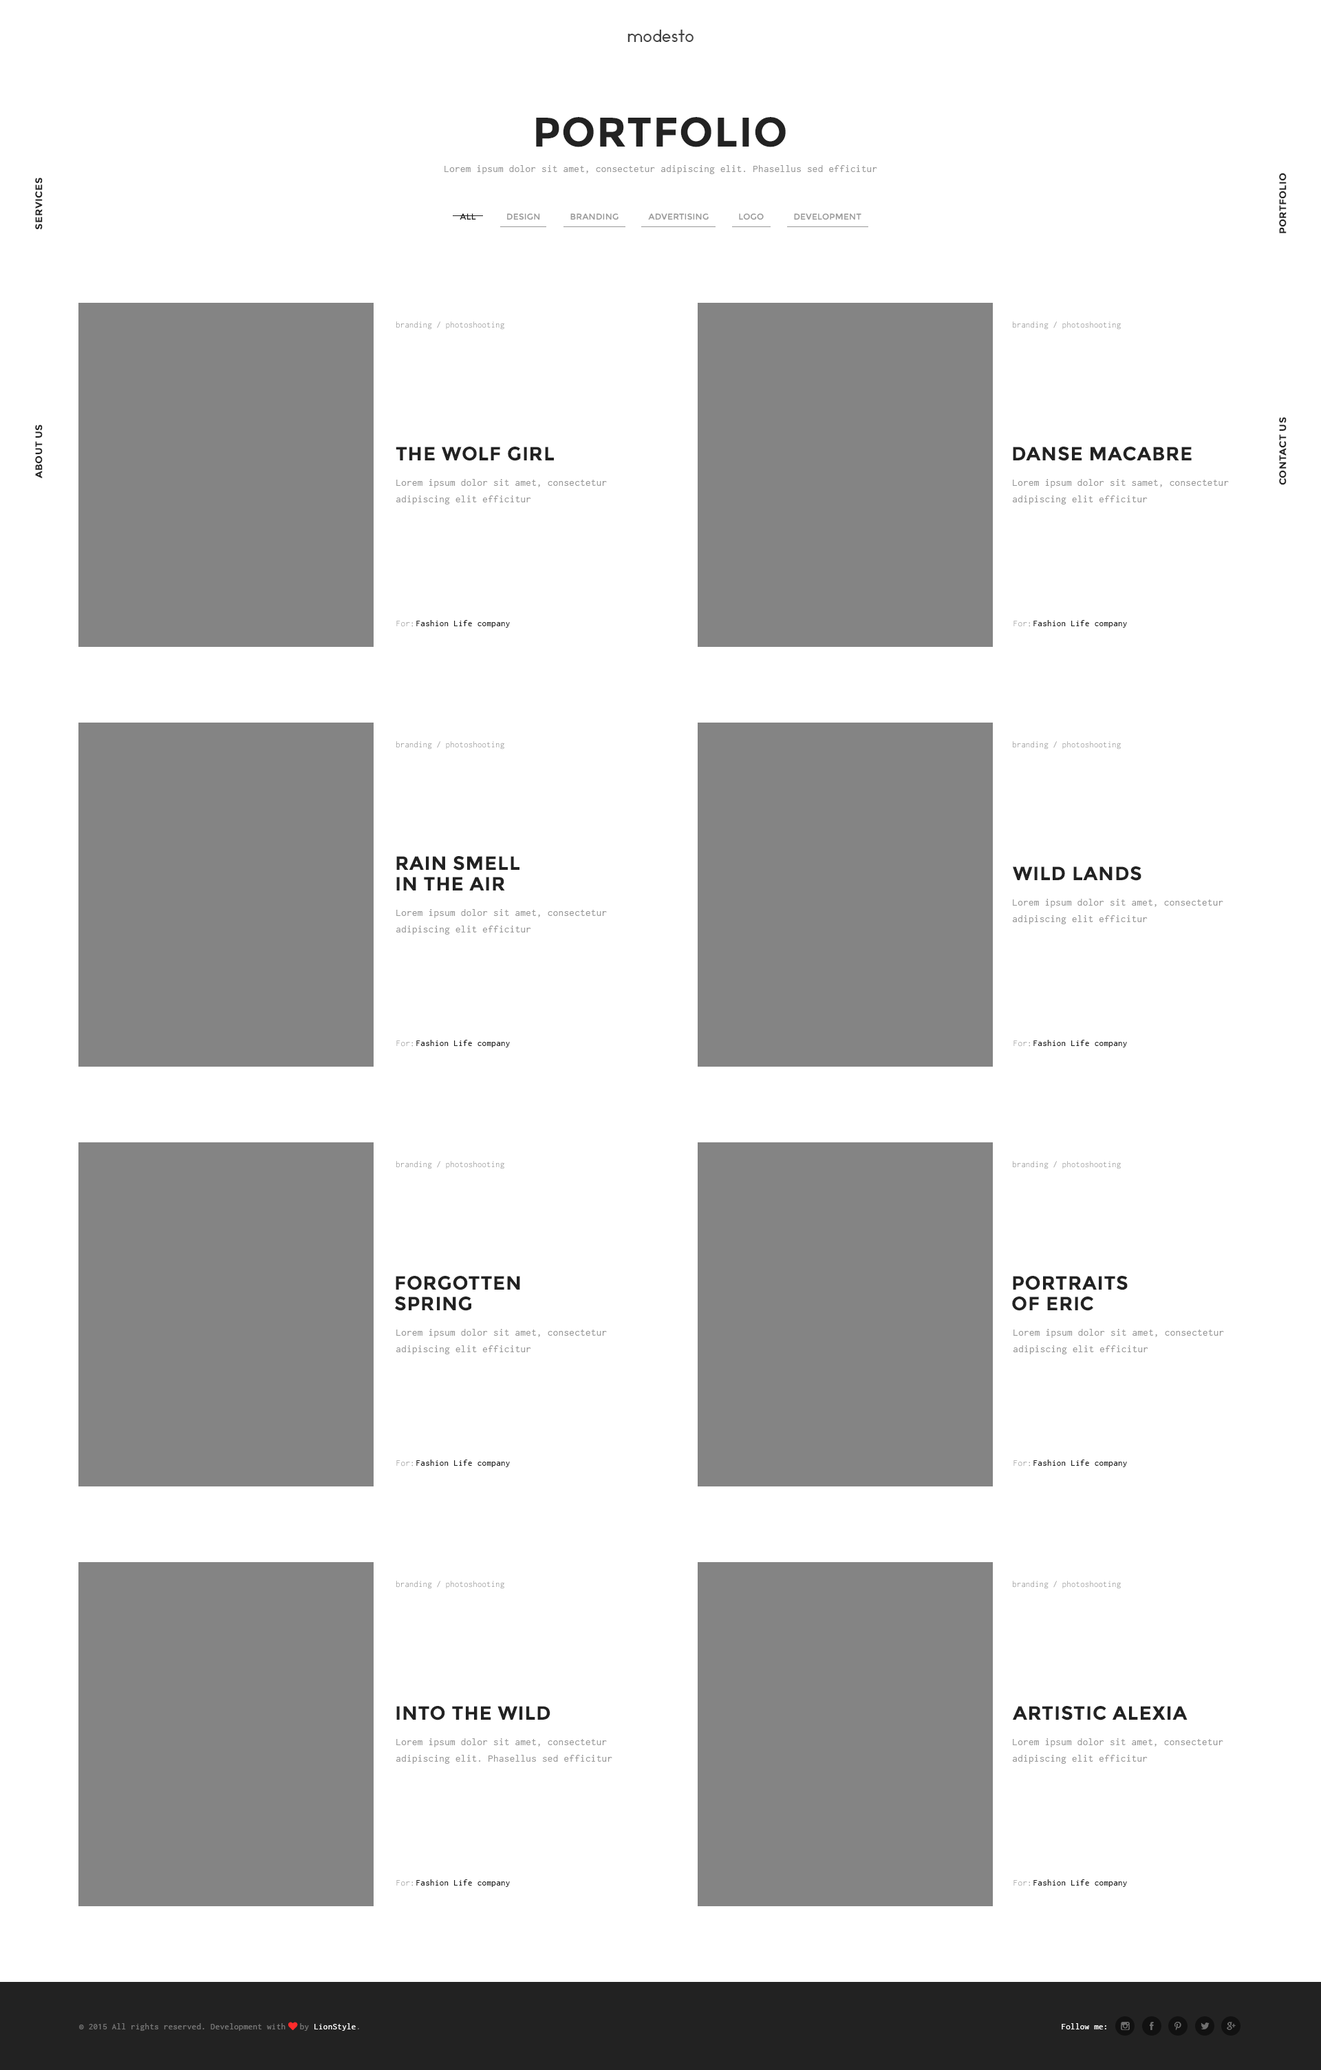
<style>
.page{position:relative;width:1321px;height:2070px;background:#ffffff}
.page>*{position:absolute;margin:0}
.t1{font:16.5px "Ikaros";letter-spacing:0.025em;color:#444444}
.t2{font:41.3px "Montserrat-Bold";letter-spacing:0.025em;color:#222222;text-transform:uppercase}
.t3{font:10.3px "Inconsolata";letter-spacing:0.025em;color:#989898}
.t4{font:9.6px "Montserrat-Bold";letter-spacing:0.025em;color:#222222;text-transform:uppercase;scale:1.03 1}
.t5{font:8.3px "Montserrat-Regular";letter-spacing:0.025em;color:#222222;text-transform:uppercase}
.t6{font:8.3px "Montserrat-Regular";letter-spacing:0.025em;color:#989898;text-transform:uppercase}
.t7{font:8.9px "Inconsolata";letter-spacing:0.025em;color:#989898;scale:0.97 1}
.t8{font:19.3px "Montserrat-Bold";letter-spacing:0.025em;color:#222222;text-transform:uppercase}
.t9{font:10.3px/16.5px "Inconsolata";letter-spacing:0.025em;color:#989898}
.t10{font:8.9px "Inconsolata";letter-spacing:0.025em;color:#989898}
.t11{font:9px "Inconsolata";letter-spacing:0.025em;color:#222222}
.t12{font:19.3px/20.6px "Montserrat-Bold";letter-spacing:0.025em;color:#222222;text-transform:uppercase}
.t13{font:8.9px "Inconsolata";letter-spacing:0.025em;color:#777777}
.t14{font:8.9px "FontAwesome";letter-spacing:0.025em;color:#fe2b2b}
.t15{font:8.9px "Inconsolata";letter-spacing:0.025em;color:#ffffff}
.t16{font:8.9px "Inconsolata";letter-spacing:0.025em;color:#fefefe}
</style>
<div class="page">
<p class="t1" style="left:628px;top:30px;width:66px;height:12px">modesto</p>
<p class="t2" style="left:536px;top:117px;width:250px;height:30px">portfolio</p>
<p class="t3" style="left:445px;top:165px;width:432px;height:9px">Lorem ipsum dolor sit amet, consectetur adipiscing elit. Phasellus sed efficitur</p>
<p class="t4" style="left:1279px;top:173px;width:8px;height:60px;rotate:-90deg">portfolio</p>
<p class="t4" style="left:35px;top:178px;width:8px;height:52px;rotate:-90deg">services</p>
<p class="t5" style="left:460px;top:213px;width:16px;height:7px">all</p>
<p class="t6" style="left:507px;top:213px;width:354px;height:7px">design            branding            advertising            logo            development</p>
<p class="t7" style="left:396px;top:321px;width:108px;height:9px">branding / photoshooting</p>
<p class="t7" style="left:1013px;top:321px;width:108px;height:9px">branding / photoshooting</p>
<p class="t4" style="left:35px;top:425px;width:8px;height:53px;rotate:-90deg">about us</p>
<p class="t4" style="left:1279px;top:417px;width:8px;height:68px;rotate:-90deg">contact us</p>
<p class="t8" style="left:396px;top:447px;width:158px;height:14px">THE WOLF GIRL</p>
<p class="t8" style="left:1013px;top:447px;width:179px;height:14px">DANSE MACABRE</p>
<p class="t9" style="left:396px;top:479px;width:211px;height:25px">Lorem ipsum dolor sit amet, consectetur adipiscing elit efficitur</p>
<p class="t9" style="left:1012px;top:479px;width:217px;height:25px">Lorem ipsum dolor sit samet, consectetur adipiscing elit efficitur</p>
<p class="t10" style="left:396px;top:621px;width:17px;height:6px">For:</p>
<p class="t11" style="left:416px;top:620px;width:94px;height:8px">Fashion Life company</p>
<p class="t10" style="left:1014px;top:621px;width:16px;height:6px">For:</p>
<p class="t11" style="left:1034px;top:620px;width:93px;height:8px">Fashion Life company</p>
<p class="t7" style="left:396px;top:741px;width:108px;height:8px">branding / photoshooting</p>
<p class="t7" style="left:1013px;top:741px;width:108px;height:8px">branding / photoshooting</p>
<p class="t12" style="left:396px;top:856px;width:124px;height:34px">RAIN SMELL <br>IN THE AIR</p>
<p class="t8" style="left:1013px;top:866px;width:129px;height:15px">wild lands</p>
<p class="t9" style="left:1012px;top:899px;width:211px;height:25px">Lorem ipsum dolor sit amet, consectetur adipiscing elit efficitur</p>
<p class="t9" style="left:396px;top:909px;width:211px;height:25px">Lorem ipsum dolor sit amet, consectetur adipiscing elit efficitur</p>
<p class="t10" style="left:396px;top:1040px;width:17px;height:7px">For:</p>
<p class="t11" style="left:416px;top:1040px;width:94px;height:7px">Fashion Life company</p>
<p class="t10" style="left:1014px;top:1040px;width:16px;height:7px">For:</p>
<p class="t11" style="left:1034px;top:1040px;width:93px;height:7px">Fashion Life company</p>
<p class="t7" style="left:396px;top:1161px;width:108px;height:8px">branding / photoshooting</p>
<p class="t7" style="left:1013px;top:1161px;width:108px;height:8px">branding / photoshooting</p>
<p class="t12" style="left:395px;top:1276px;width:125px;height:35px">forgotten <br>spring</p>
<p class="t12" style="left:1012px;top:1276px;width:116px;height:35px">portraits <br>of Eric</p>
<p class="t9" style="left:396px;top:1329px;width:211px;height:25px">Lorem ipsum dolor sit amet, consectetur adipiscing elit efficitur</p>
<p class="t9" style="left:1013px;top:1329px;width:211px;height:25px">Lorem ipsum dolor sit amet, consectetur adipiscing elit efficitur</p>
<p class="t10" style="left:396px;top:1460px;width:17px;height:6px">For:</p>
<p class="t11" style="left:416px;top:1459px;width:94px;height:8px">Fashion Life company</p>
<p class="t10" style="left:1014px;top:1460px;width:16px;height:6px">For:</p>
<p class="t11" style="left:1034px;top:1459px;width:93px;height:8px">Fashion Life company</p>
<p class="t7" style="left:396px;top:1581px;width:108px;height:8px">branding / photoshooting</p>
<p class="t7" style="left:1013px;top:1581px;width:108px;height:8px">branding / photoshooting</p>
<p class="t8" style="left:396px;top:1706px;width:154px;height:14px">INTO THE WILD</p>
<p class="t8" style="left:1012px;top:1706px;width:176px;height:14px">artistic Alexia</p>
<p class="t9" style="left:396px;top:1738px;width:216px;height:26px">Lorem ipsum dolor sit amet, consectetur adipiscing elit. Phasellus sed efficitur</p>
<p class="t9" style="left:1012px;top:1738px;width:211px;height:26px">Lorem ipsum dolor sit amet, consectetur adipiscing elit efficitur</p>
<p class="t10" style="left:396px;top:1880px;width:17px;height:6px">For:</p>
<p class="t11" style="left:416px;top:1879px;width:94px;height:8px">Fashion Life company</p>
<p class="t10" style="left:1014px;top:1880px;width:16px;height:6px">For:</p>
<p class="t11" style="left:1034px;top:1879px;width:93px;height:8px">Fashion Life company</p>
<p class="t13" style="left:79px;top:2022px;width:280px;height:9px">© 2015 All rights reserved. Development with <span class="t14">♥ </span>by <span class="t15">LionStyle</span>.</p>
<p class="t16" style="left:1062px;top:2023px;width:44px;height:6px">Follow me:</p>
</div>
